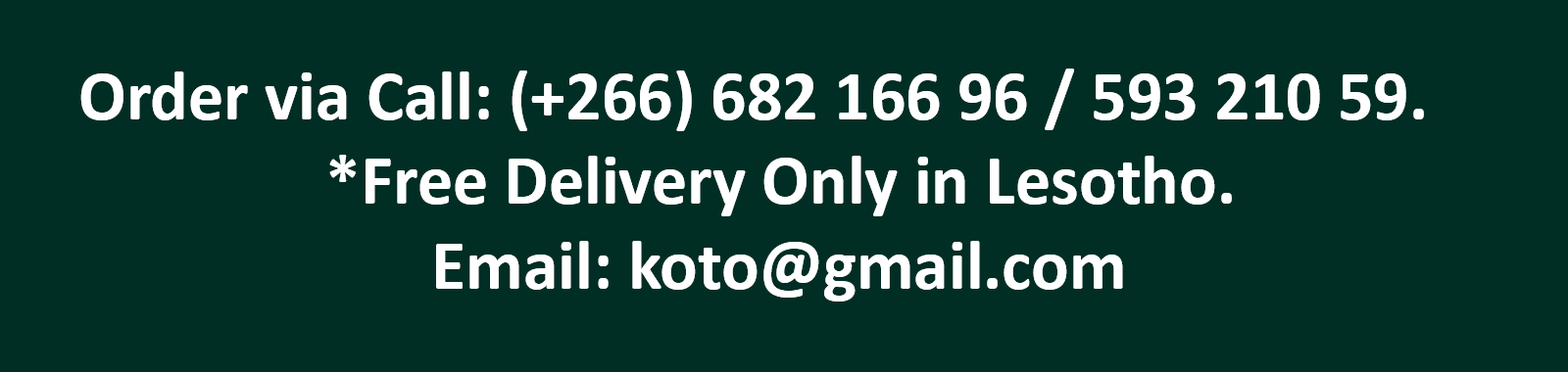
<style>
.page{position:relative;width:1568px;height:372px;background:#002e25}
.page>*{position:absolute;margin:0}
.t1{font:70.6px "Calibri-Bold";color:#ffffff}
</style>
<div class="page">
<p class="t1" style="left:80px;top:69px;width:1344px;height:233px">Order via Call: (+266) 682 166 96 / 593 210 59. <br>       *Free Delivery Only in Lesotho.<br>          Email: koto@gmail.com</p>
</div>
